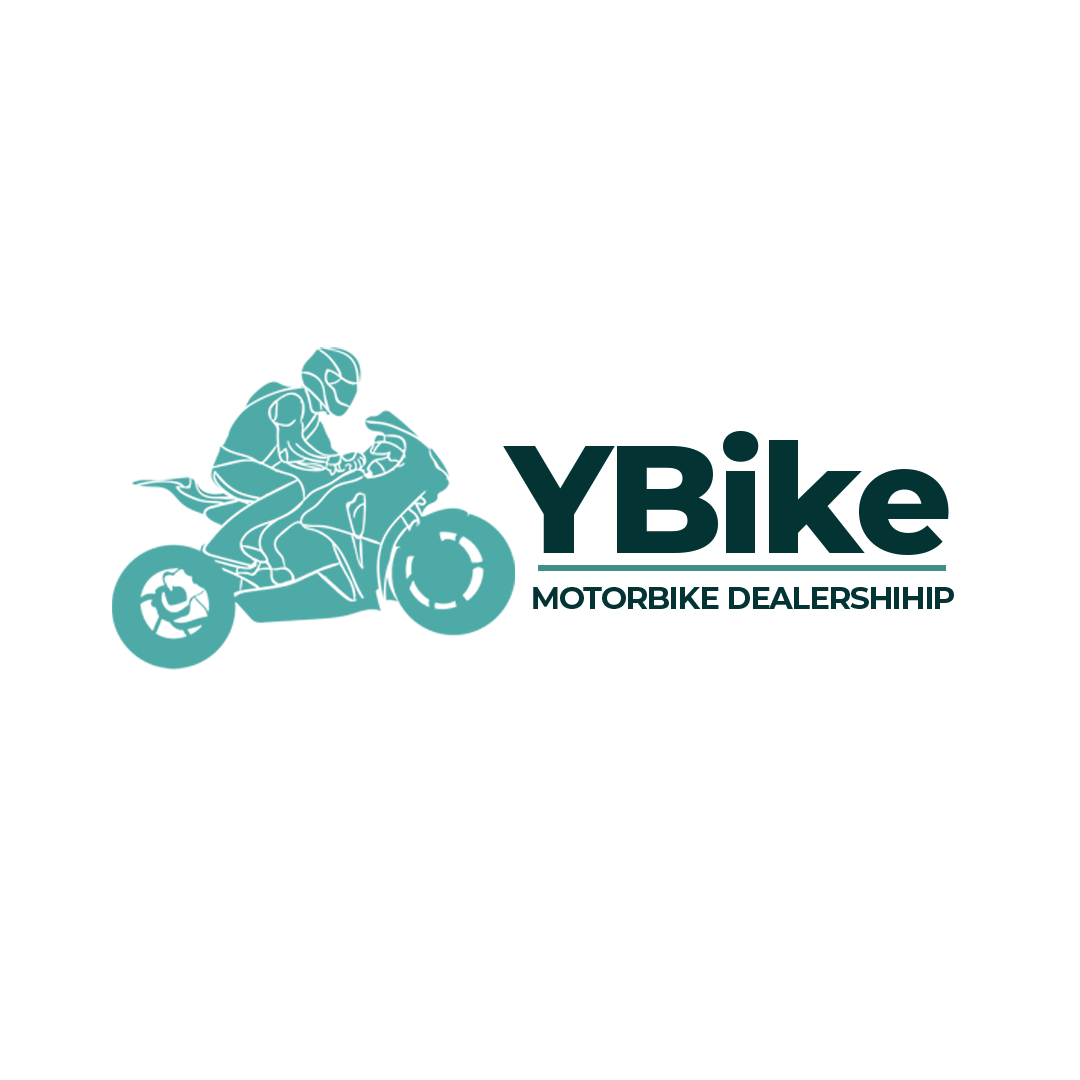
<style>
.page{position:relative;width:1080px;height:1080px;background:#ffffff}
.page>*{position:absolute;margin:0}
.t1{font:152.2px "Montserrat-ExtraBold";letter-spacing:-0.035em;color:#033333}
.t2{font:30.4px "Montserrat-Bold";letter-spacing:-0.035em;color:#033333}
</style>
<div class="page">
<p class="t1" style="left:503px;top:431px;width:446px;height:124px">YBike</p>
<p class="t2" style="left:533px;top:587px;width:421px;height:22px">MOTORBIKE DEALERSHIHIP</p>
</div>
